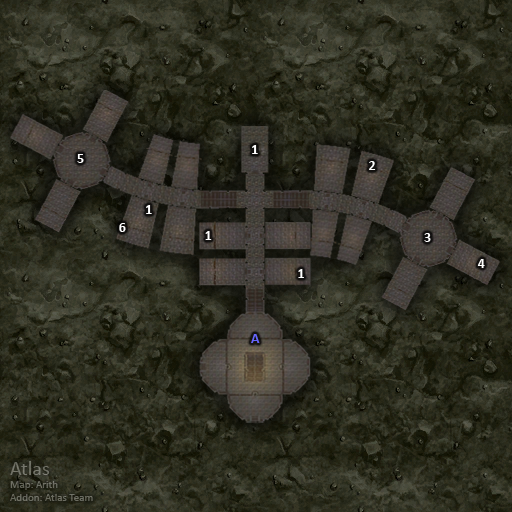
<style>
.page{position:relative;width:512px;height:512px}
.page>*{position:absolute;margin:0}
.t1{font:14px "Calibri-Bold";color:#ffffff}
.t2{font:14px "Calibri-Bold";color:#6666ff}
</style>
<div class="page">
<p class="t1" style="left:252px;top:145px;width:6px;height:9px">1</p>
<p class="t1" style="left:77px;top:154px;width:7px;height:9px">5</p>
<p class="t1" style="left:369px;top:161px;width:7px;height:9px">2</p>
<p class="t1" style="left:146px;top:205px;width:6px;height:9px">1</p>
<p class="t1" style="left:119px;top:223px;width:7px;height:9px">6</p>
<p class="t1" style="left:205px;top:231px;width:7px;height:9px">1</p>
<p class="t1" style="left:424px;top:233px;width:7px;height:9px">3</p>
<p class="t1" style="left:298px;top:269px;width:6px;height:9px">1</p>
<p class="t1" style="left:477px;top:259px;width:8px;height:9px">4</p>
<p class="t2" style="left:251px;top:334px;width:9px;height:9px">A</p>
</div>
